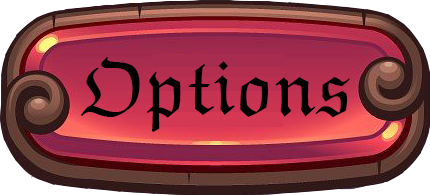
<style>
.page{position:relative;width:430px;height:195px}
.page>*{position:absolute;margin:0}
.t1{font:80px "EuclidFraktur";color:#000000}
</style>
<div class="page">
<p class="t1" style="left:80px;top:57px;width:270px;height:75px">Options</p>
</div>
